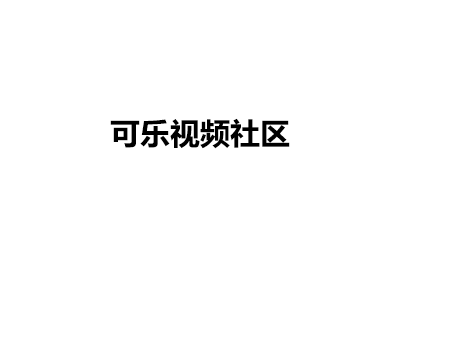
<style>
.page{position:relative;width:454px;height:340px;background:#ffffff}
.page>*{position:absolute;margin:0}
.t1{font:30px "MicrosoftYaHei-Bold";color:#000000}
</style>
<div class="page">
<p class="t1" style="left:110px;top:118px;width:180px;height:31px">可乐视频社区</p>
</div>
